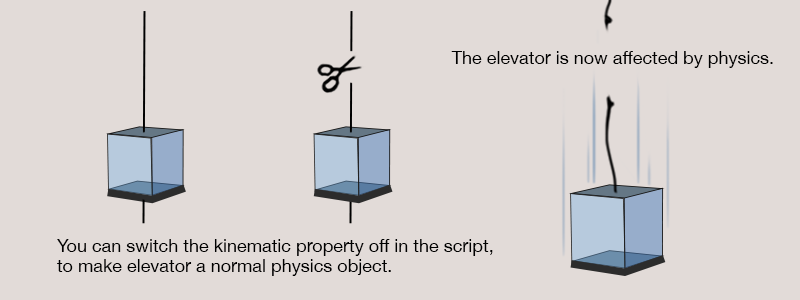
<style>
.page{position:relative;width:800px;height:300px;background:#e2dbd8}
.page>*{position:absolute;margin:0}
.t1{font:18px "HelveticaNeue";color:#000000}
.t2{font:18px/20px "HelveticaNeue";color:#000000}
</style>
<div class="page">
<p class="t1" style="left:451px;top:51px;width:322px;height:17px">The elevator is now affected by physics.</p>
<p class="t2" style="left:57px;top:239px;width:436px;height:37px">You can switch the kinematic property off in the script, <br>to make elevator a normal physics object.</p>
</div>
